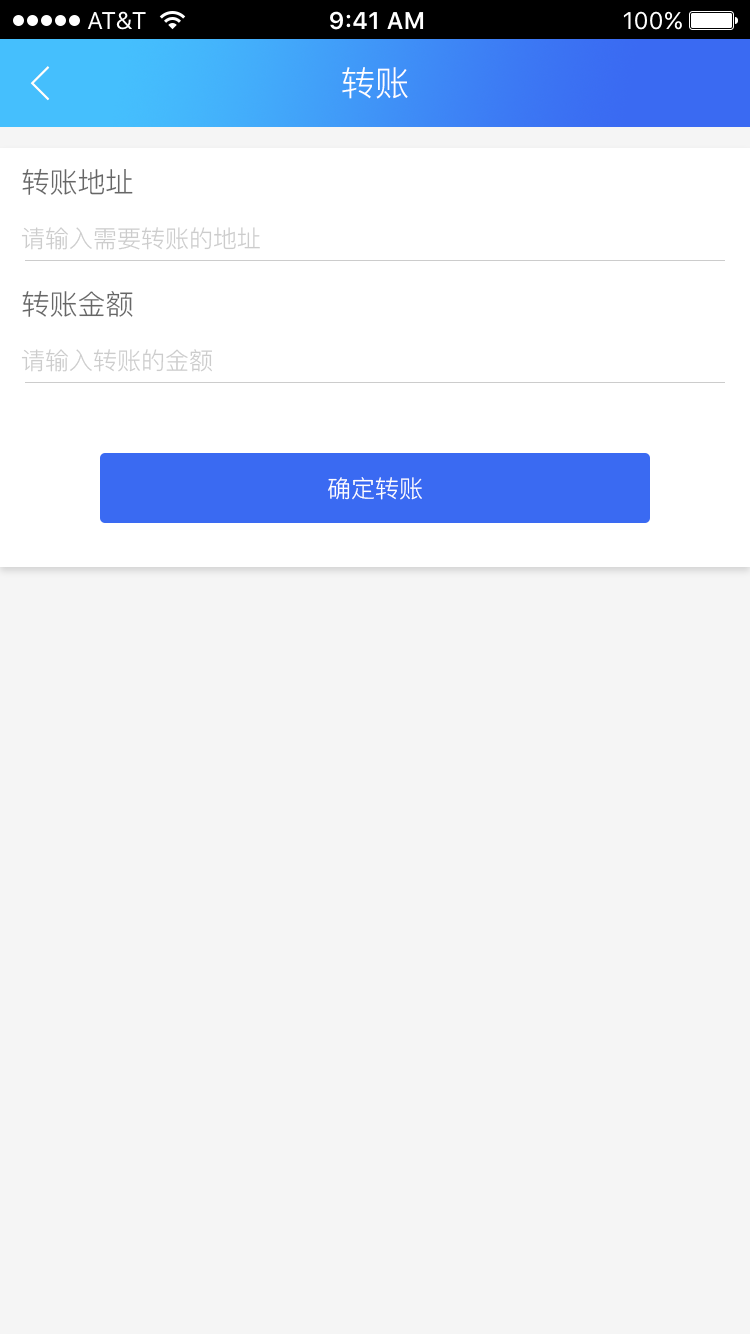
<style>
.page{position:relative;width:750px;height:1334px;background:#f5f5f5}
.page>*{position:absolute;margin:0}
.t1{font:34px "PingFang-SC-Regular";color:#ffffff}
.t2{font:28px "PingFang-SC-Regular";color:#666666}
.t3{font:24px "PingFang-SC-Regular";color:#cccccc}
.t4{font:24px "PingFang-SC-Regular";color:#ffffff}
</style>
<div class="page">
<p class="t1" style="left:342px;top:67px;width:66px;height:32px">转账</p>
<p class="t2" style="left:22px;top:168px;width:111px;height:27px">转账地址</p>
<p class="t3" style="left:21px;top:227px;width:239px;height:23px">请输入需要转账的地址</p>
<p class="t2" style="left:22px;top:290px;width:111px;height:27px">转账金额</p>
<p class="t3" style="left:21px;top:349px;width:191px;height:23px">请输入转账的金额</p>
<p class="t4" style="left:328px;top:477px;width:94px;height:23px">确定转账</p>
</div>
